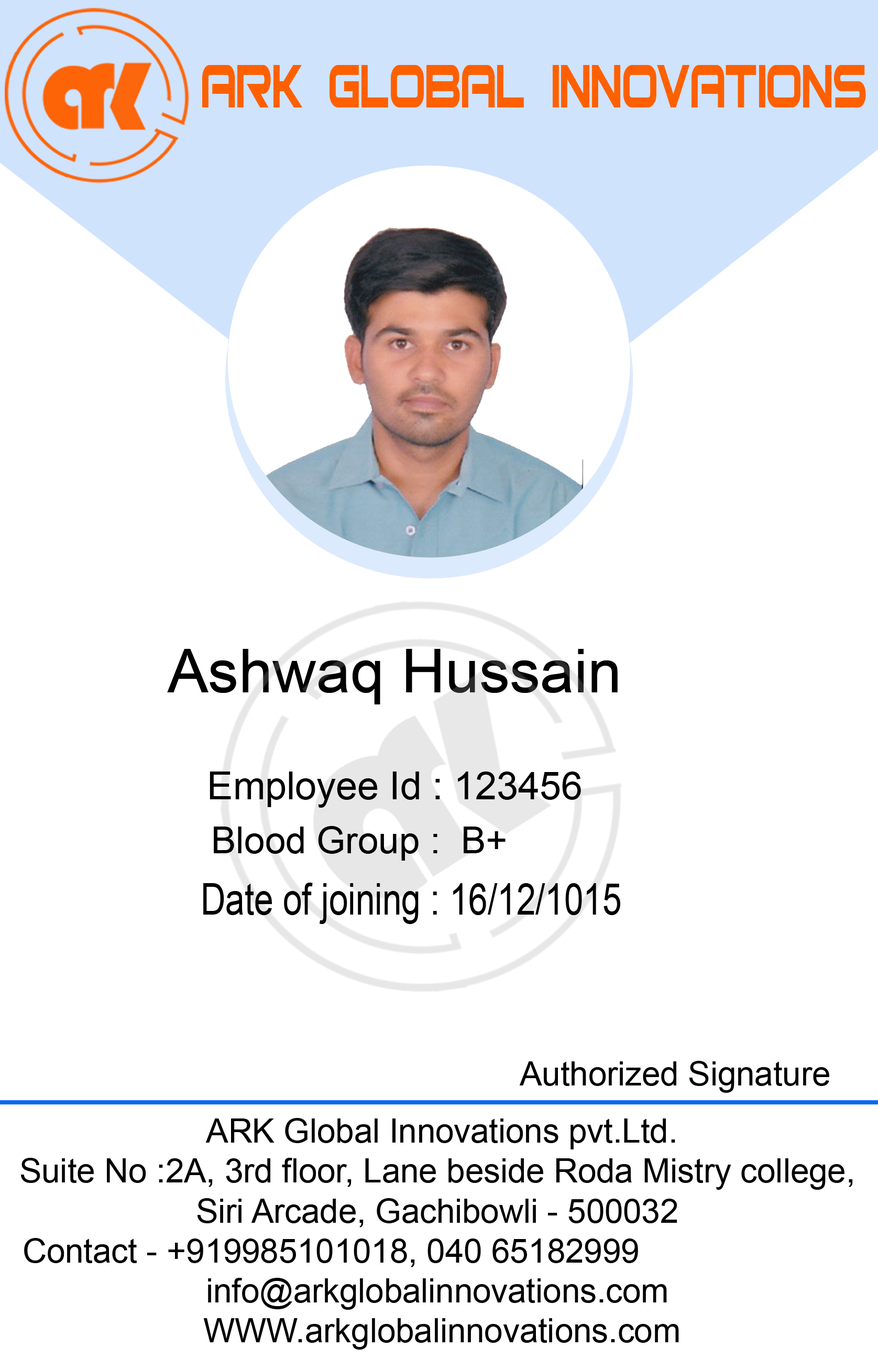
<style>
.page{position:relative;width:878px;height:1358px;background:#ffffff}
.page>*{position:absolute;margin:0}
.t1{font:81.6px "Bitsumishi";color:#fe6000;scale:0.63 1}
.t2{font:61px "ArialMT";color:#000000}
.t3{font:38.6px "ArialMT";color:#000000}
.t4{font:37.1px "ArialMT";color:#000000}
.t5{font:43.9px "ArialMT";color:#000000;scale:0.79 1}
.t6{font:33.3px "ArialMT";color:#000000}
</style>
<div class="page">
<p class="t1" style="left:202px;top:65px;width:664px;height:42px">ARK Global innovations</p>
<p class="t2" style="left:167px;top:649px;width:451px;height:55px">Ashwaq Hussain</p>
<p class="t3" style="left:210px;top:771px;width:371px;height:37px">Employee Id : 123456</p>
<p class="t4" style="left:214px;top:826px;width:292px;height:34px">Blood Group :  B+</p>
<p class="t5" style="left:203px;top:882px;width:417px;height:42px">Date of joining : 16/12/1015</p>
<p class="t6" style="left:519px;top:1061px;width:311px;height:32px">Authorized Signature</p>
<p class="t6" style="left:20px;top:1118px;width:833px;height:231px;text-align:center">ARK Global Innovations pvt.Ltd.<br>Suite No :2A, 3rd floor, Lane beside Roda Mistry college, <br>Siri Arcade, Gachibowli - 500032 <br>Contact - +919985101018, 040 65182999                        <br>info@arkglobalinnovations.com <br>WWW.arkglobalinnovations.com</p>
</div>
